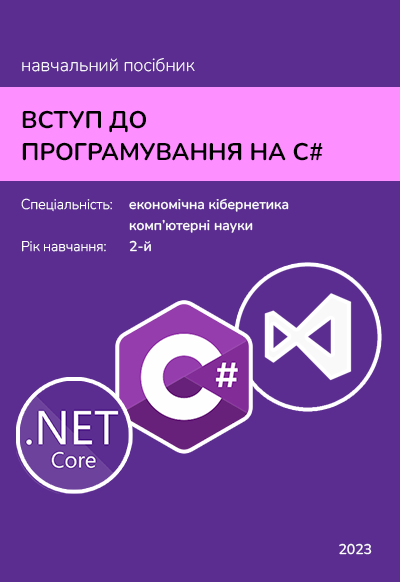
<style>
.page{position:relative;width:400px;height:582px;background:#5c2d91}
.page>*{position:absolute;margin:0}
.t1{font:18px "Nunito-ExtraLight";color:#ffffff}
.t2{font:24px/32px "Nunito-Bold";color:#000000;text-transform:uppercase}
.t3{font:14px/21px "Nunito-Medium";color:#ffffff}
.t4{font:14px/21px "Nunito-ExtraLight";color:#ffffff}
.t5{font:14px "Nunito-Medium";color:#ffffff;text-transform:uppercase}
</style>
<div class="page">
<p class="t1" style="left:22px;top:58px;width:173px;height:14px">навчальний посібник</p>
<p class="t2" style="left:22px;top:110px;width:301px;height:51px">ВСТУП ДО <br>ПРОГРАМУВАННЯ НА C#</p>
<p class="t3" style="left:21px;top:198px;width:268px;height:54px"><span class="t4">Спеціальність:  </span>економічна кібернетика<br>   комп’ютерні науки<br><span class="t4">Рік навчання:  </span>2-й</p>
<p class="t5" style="left:339px;top:543px;width:33px;height:12px">2023</p>
</div>
